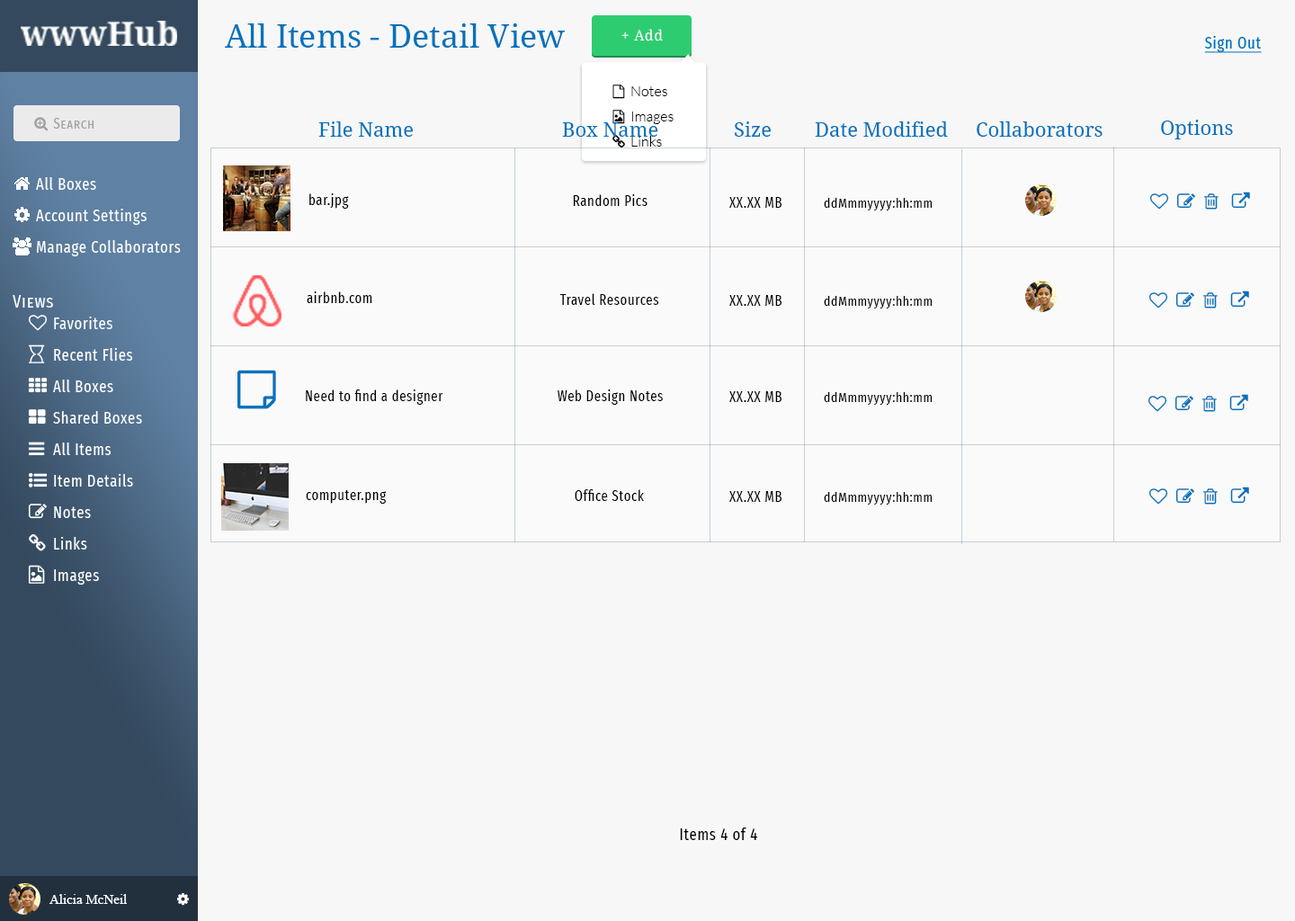
<style>
.page{position:relative;width:1295px;height:921px;background:#f7f7f7}
.page>*{position:absolute;margin:0}
.t1{font:32.4px "DroidSerif";color:#0072bc}
.t2{font:14.4px "DroidSerif";letter-spacing:0.04em;color:#ffffff}
.t3{font:14.4px/25.2px "Lato-Light";color:#000000}
.t4{font:19.8px "DroidSerif";color:#0072bc}
.t5{font:14.4px "FiraSansExtraCondensed-Regular";letter-spacing:0.04em;color:#000000}
.t6{font:13.5px "FiraSansExtraCondensed-Regular";letter-spacing:0.04em;color:#000000}
.t7{font:16.2px "FiraSansExtraCondensed-Regular";letter-spacing:0.04em;color:#000000}
.t8{font:13.5px "TimesNewRomanPSMT";color:#ffffff}
</style>
<div class="page">
<p class="t1" style="left:225px;top:23px;width:340px;height:25px">All Items - Detail View</p>
<p class="t2" style="left:621px;top:29px;width:42px;height:12px">+ Add</p>
<p class="t3" style="left:631px;top:86px;width:43px;height:61px">Notes<br>Images<br>Links</p>
<p class="t4" style="left:318px;top:121px;width:95px;height:16px">File Name</p>
<p class="t4" style="left:562px;top:122px;width:96px;height:15px">Box Name</p>
<p class="t4" style="left:734px;top:121px;width:37px;height:16px">Size</p>
<p class="t4" style="left:815px;top:121px;width:133px;height:16px">Date Modified</p>
<p class="t4" style="left:977px;top:121px;width:125px;height:16px">Collaborators</p>
<p class="t4" style="left:1161px;top:120px;width:72px;height:19px">Options</p>
<p class="t5" style="left:309px;top:193px;width:40px;height:16px">bar.jpg</p>
<p class="t5" style="left:573px;top:194px;width:74px;height:12px">Random Pics</p>
<p class="t5" style="left:729px;top:197px;width:53px;height:11px">XX.XX MB</p>
<p class="t6" style="left:824px;top:198px;width:109px;height:12px">ddMmmyyyy:hh:mm</p>
<p class="t5" style="left:307px;top:291px;width:65px;height:12px">airbnb.com</p>
<p class="t5" style="left:559px;top:293px;width:100px;height:12px">Travel Resources</p>
<p class="t5" style="left:729px;top:295px;width:53px;height:11px">XX.XX MB</p>
<p class="t6" style="left:824px;top:296px;width:109px;height:12px">ddMmmyyyy:hh:mm</p>
<p class="t5" style="left:306px;top:389px;width:137px;height:16px">Need to find a designer</p>
<p class="t5" style="left:558px;top:389px;width:105px;height:16px">Web Design Notes</p>
<p class="t5" style="left:729px;top:391px;width:53px;height:11px">XX.XX MB</p>
<p class="t6" style="left:824px;top:392px;width:109px;height:13px">ddMmmyyyy:hh:mm</p>
<p class="t5" style="left:306px;top:490px;width:81px;height:14px">computer.png</p>
<p class="t5" style="left:575px;top:489px;width:69px;height:12px">Office Stock</p>
<p class="t5" style="left:729px;top:491px;width:53px;height:11px">XX.XX MB</p>
<p class="t6" style="left:824px;top:492px;width:109px;height:12px">ddMmmyyyy:hh:mm</p>
<p class="t7" style="left:680px;top:827px;width:77px;height:13px">Items 4 of 4</p>
<p class="t8" style="left:49px;top:894px;width:78px;height:10px">Alicia McNeil</p>
</div>
